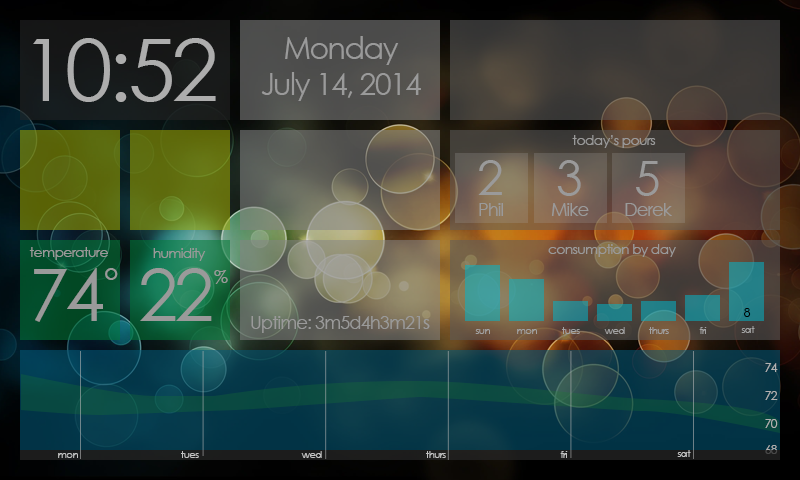
<style>
.page{position:relative;width:800px;height:480px}
.page>*{position:absolute;margin:0}
.t1{font:86px "CenturyGothic";letter-spacing:-0.05em;color:#adadad}
.t2{font:30px "CenturyGothic";letter-spacing:-0.05em;color:#9a9a9a}
.t3{font:14px "CenturyGothic";letter-spacing:-0.05em;color:#9a9a9a}
.t4{font:48px "CenturyGothic";letter-spacing:-0.05em;color:#9a9a9a}
.t5{font:18px "CenturyGothic";letter-spacing:-0.05em;color:#9a9a9a}
.t6{font:72px "CenturyGothic";letter-spacing:-0.05em;color:#9a9a9a}
.t7{font:36px "CenturyGothic";letter-spacing:-0.05em;color:#9a9a9a}
.t8{font:12px "CenturyGothic";letter-spacing:-0.05em;color:#000000}
.t9{font:10px "CenturyGothic";letter-spacing:-0.05em;color:#a2a2a2}
.t10{font:12px "CenturyGothic";letter-spacing:-0.05em;color:#b1b1b1}
.t11{font:12px "CenturyGothic";letter-spacing:-0.05em}
.t12{font:10px "CenturyGothic";letter-spacing:-0.05em;color:#c3c3c3}
</style>
<div class="page">
<p class="t1" style="left:33px;top:38px;width:183px;height:64px">10:52</p>
<p class="t2" style="left:261px;top:36px;width:160px;height:65px;text-align:center">Monday<br>July 14, 2014</p>
<p class="t3" style="left:572px;top:135px;width:84px;height:13px">today’s pours</p>
<p class="t4" style="left:478px;top:160px;width:24px;height:35px">2</p>
<p class="t4" style="left:557px;top:160px;width:24px;height:36px">3</p>
<p class="t4" style="left:636px;top:161px;width:23px;height:35px">5</p>
<p class="t5" style="left:479px;top:203px;width:24px;height:13px">Phil</p>
<p class="t5" style="left:551px;top:203px;width:38px;height:13px">Mike</p>
<p class="t5" style="left:625px;top:203px;width:47px;height:13px">Derek</p>
<p class="t3" style="left:548px;top:244px;width:128px;height:13px">consumption by day</p>
<p class="t3" style="left:29px;top:247px;width:79px;height:13px">temperature</p>
<p class="t3" style="left:153px;top:248px;width:53px;height:13px">humidity</p>
<p class="t6" style="left:34px;top:268px;width:69px;height:54px">74</p>
<p class="t7" style="left:105px;top:268px;width:13px;height:12px">°</p>
<p class="t6" style="left:140px;top:268px;width:72px;height:53px">22</p>
<p class="t5" style="left:214px;top:270px;width:14px;height:14px">%</p>
<p class="t5" style="left:251px;top:316px;width:179px;height:17px">Uptime: 3m5d4h3m21s</p>
<p class="t8" style="left:744px;top:308px;width:7px;height:9px">8</p>
<p class="t9" style="left:475px;top:329px;width:15px;height:5px">sun</p>
<p class="t9" style="left:517px;top:329px;width:20px;height:5px">mon</p>
<p class="t9" style="left:562px;top:327px;width:18px;height:7px">tues</p>
<p class="t9" style="left:604px;top:327px;width:21px;height:7px">wed</p>
<p class="t9" style="left:649px;top:327px;width:20px;height:7px">thurs</p>
<p class="t9" style="left:699px;top:327px;width:8px;height:7px">fri</p>
<p class="t9" style="left:741px;top:326px;width:14px;height:7px">sat</p>
<p class="t10" style="left:765px;top:363px;width:13px;height:9px">74</p>
<p class="t10" style="left:765px;top:391px;width:13px;height:9px">72</p>
<p class="t10" style="left:765px;top:419px;width:13px;height:9px">70</p>
<p class="t11" style="left:765px;top:445px;width:13px;height:9px">68</p>
<p class="t12" style="left:58px;top:453px;width:20px;height:5px">mon</p>
<p class="t12" style="left:181px;top:451px;width:18px;height:7px">tues</p>
<p class="t12" style="left:301px;top:451px;width:21px;height:7px">wed</p>
<p class="t12" style="left:426px;top:451px;width:20px;height:7px">thurs</p>
<p class="t12" style="left:560px;top:451px;width:8px;height:7px">fri</p>
<p class="t12" style="left:677px;top:450px;width:14px;height:7px">sat</p>
</div>
